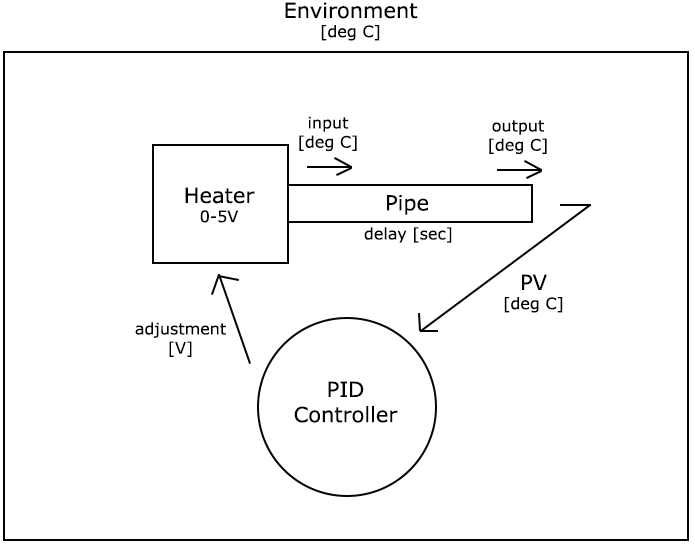
<style>
.page{position:relative;width:695px;height:547px;background:#ffffff}
.page>*{position:absolute;margin:0}
.t1{font:21px "Verdana";color:#000000}
.t2{font:16px "Verdana";color:#000000}
</style>
<div class="page">
<p class="t1" style="left:285px;top:2px;width:133px;height:39px;text-align:center">Environment<br><span class="t2">[deg C]</span></p>
<p class="t2" style="left:299px;top:116px;width:58px;height:36px;text-align:center">input<br>[deg C]</p>
<p class="t2" style="left:489px;top:120px;width:58px;height:35px;text-align:center">output<br>[deg C]</p>
<p class="t1" style="left:185px;top:187px;width:70px;height:36px;text-align:center">Heater<br><span class="t2">0-5V</span></p>
<p class="t1" style="left:387px;top:195px;width:41px;height:20px">Pipe</p>
<p class="t2" style="left:364px;top:227px;width:88px;height:16px">delay [sec]</p>
<p class="t2" style="left:504px;top:274px;width:59px;height:39px;text-align:center"><span class="t1">PV<br></span>[deg C]</p>
<p class="t2" style="left:135px;top:322px;width:91px;height:35px;text-align:center">adjustment<br>[V]</p>
<p class="t1" style="left:294px;top:381px;width:104px;height:42px;text-align:center">PID<br>Controller</p>
</div>
